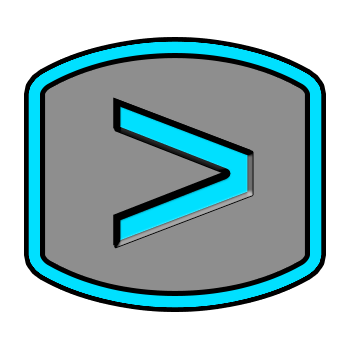
<style>
.page{position:relative;width:350px;height:350px;background:#ffffff}
.page>*{position:absolute;margin:0}
.t1{font:273.5px "LiberationSans-Bold"}
</style>
<div class="page">
<p class="t1" style="left:115px;top:99px;width:138px;height:149px">&gt;</p>
</div>
